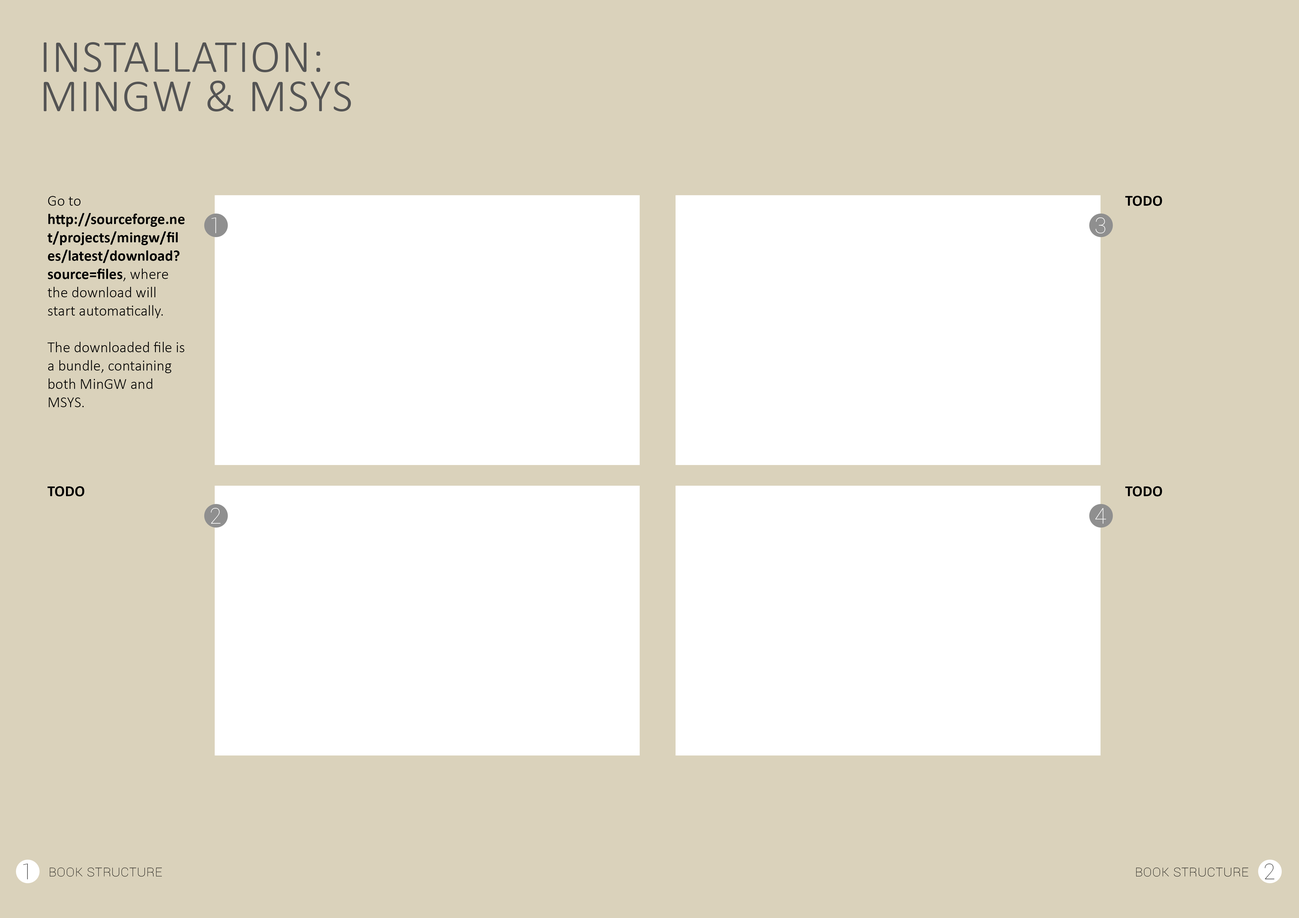
<style>
.page{position:relative;width:1299px;height:918px;background:#dad2bb}
.page>*{position:absolute;margin:0}
.t1{font:45.8px/39.3px "Calibri-Light";letter-spacing:0.025em;color:#545454;text-transform:uppercase}
.t2{font:15.3px "Calibri-Light";color:#000000}
.t3{font:15.3px "Calibri-Bold";color:#000000}
.t4{font:21.8px "Roboto-Thin";color:#ffffff}
.t5{font:21.8px "Roboto-Thin";color:#484848}
.t6{font:15.3px "Roboto-Thin";color:#000000;font-variant:small-caps}
</style>
<div class="page">
<p class="t1" style="left:44px;top:42px;width:307px;height:70px">installation: <br>mingw &amp; msys</p>
<p class="t2" style="left:47px;top:196px;width:138px;height:211px">Go to <span class="t3">http://sourceforge.net/projects/mingw/files/latest/download?source=files</span>, where the download will start automatically.<br><br>The downloaded file is a bundle, containing both MinGW and MSYS.</p>
<p class="t3" style="left:1125px;top:196px;width:37px;height:10px">TODO</p>
<p class="t4" style="left:211px;top:218px;width:5px;height:15px">1</p>
<p class="t4" style="left:1095px;top:217px;width:10px;height:16px">3</p>
<p class="t3" style="left:47px;top:486px;width:37px;height:11px">TODO</p>
<p class="t3" style="left:1125px;top:486px;width:37px;height:11px">TODO</p>
<p class="t4" style="left:211px;top:508px;width:9px;height:16px">2</p>
<p class="t4" style="left:1095px;top:508px;width:11px;height:16px">4</p>
<p class="t5" style="left:23px;top:864px;width:5px;height:16px">1</p>
<p class="t6" style="left:50px;top:868px;width:112px;height:9px">Book structure</p>
<p class="t6" style="left:1136px;top:868px;width:112px;height:9px">Book structure</p>
<p class="t5" style="left:1264px;top:864px;width:10px;height:16px">2</p>
</div>
